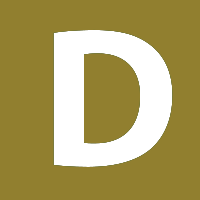
<style>
.page{position:relative;width:200px;height:200px;background:#917f2f}
.page>*{position:absolute;margin:0}
.t1{font:200px "MyriadPro-Bold";color:#ffffff}
</style>
<div class="page">
<p class="t1" style="left:53px;top:29px;width:120px;height:138px">D</p>
</div>
